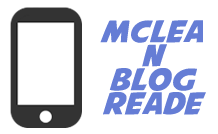
<style>
.page{position:relative;width:218px;height:134px;background:#ffffff}
.page>*{position:absolute;margin:0}
.t1{font:30px/24px "AvengeanceMightiestAvenger";color:#657dd5;scale:1.08 1}
</style>
<div class="page">
<p class="t1" style="left:100px;top:20px;width:106px;height:95px;text-align:center">MCLEAN<br>BLOG <br>READER</p>
</div>
